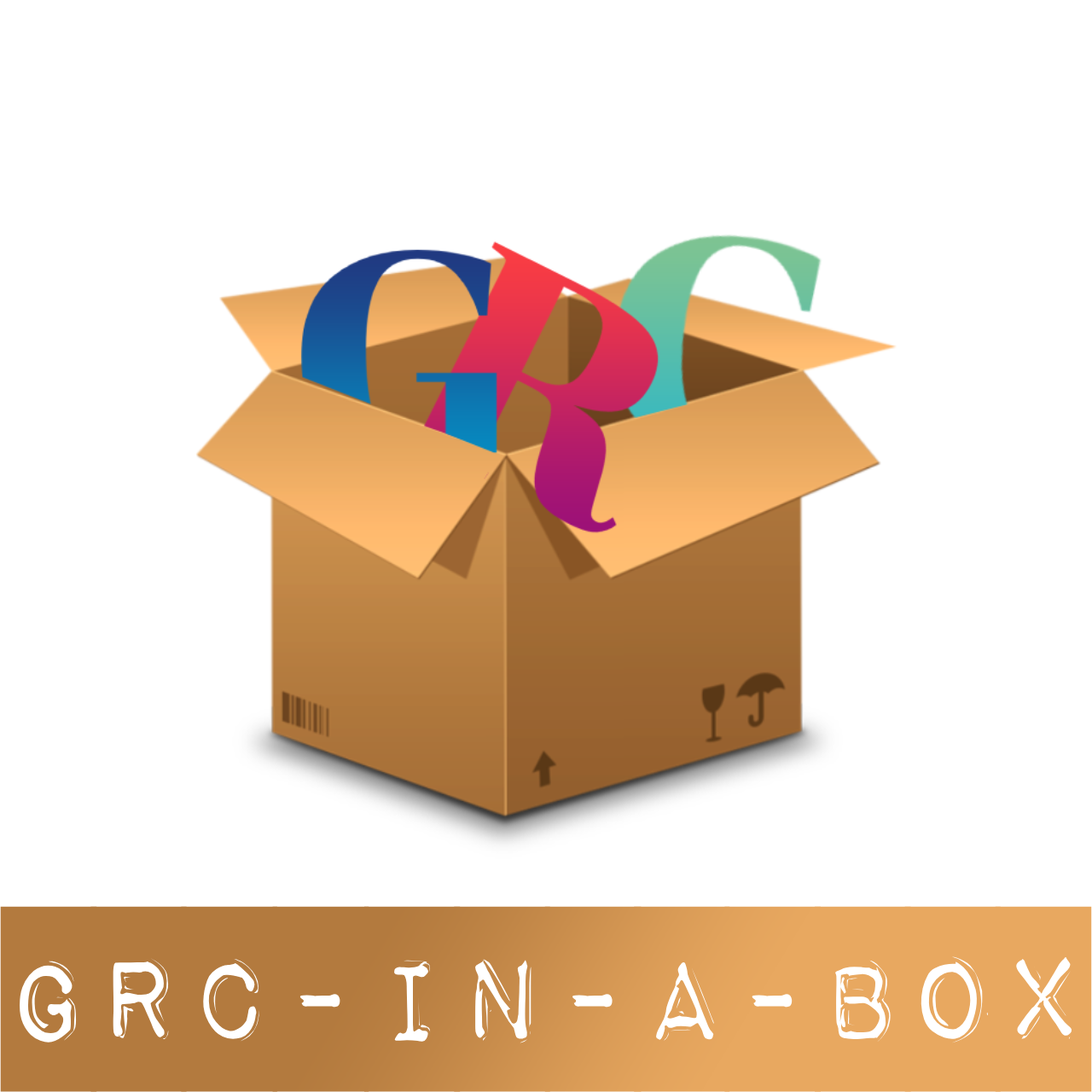
<style>
.page{position:relative;width:1092px;height:1092px;background:#ffffff}
.page>*{position:absolute;margin:0}
.t1{font:151.4px "ImpactLabel"}
</style>
<div class="page">
<p class="t1" style="left:0px;top:906px;width:1092px;height:186px">GRC-in-a-Box</p>
</div>
